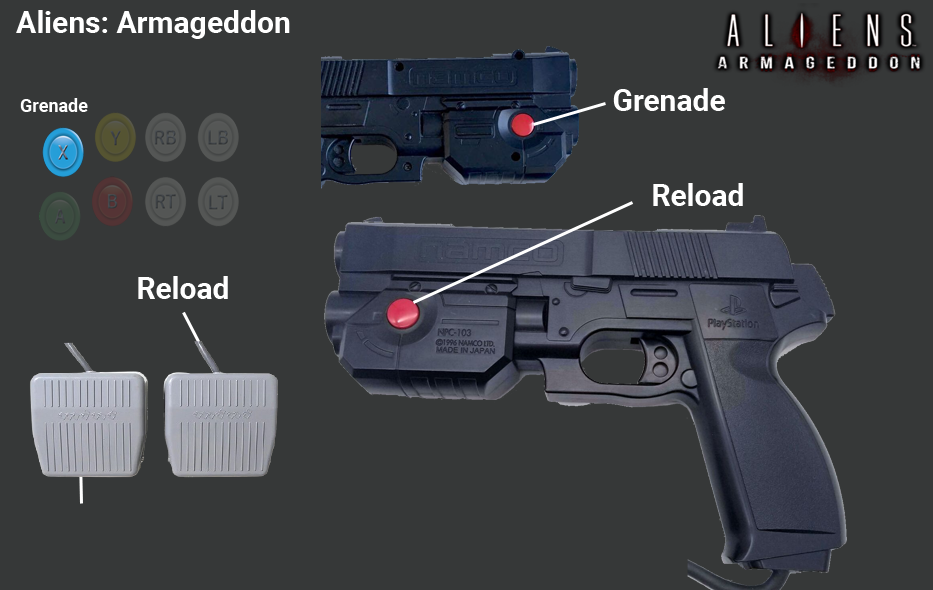
<style>
.page{position:relative;width:933px;height:590px;background:#363838}
.page>*{position:absolute;margin:0}
.t1{font:30px "Roboto-Bold";color:#ffffff}
.t2{font:18px "Roboto-Bold";color:#ffffff}
</style>
<div class="page">
<p class="t1" style="left:16px;top:10px;width:274px;height:29px">Aliens: Armageddon</p>
<p class="t1" style="left:613px;top:88px;width:112px;height:23px">Grenade</p>
<p class="t2" style="left:20px;top:98px;width:68px;height:14px">Grenade</p>
<p class="t1" style="left:653px;top:183px;width:90px;height:23px">Reload</p>
<p class="t1" style="left:138px;top:276px;width:90px;height:23px">Reload</p>
</div>
